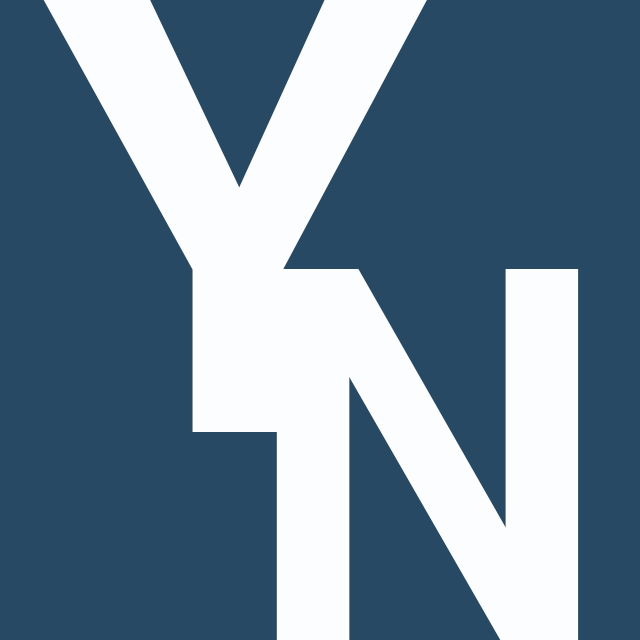
<style>
.page{position:relative;width:640px;height:640px;background:#274963}
.page>*{position:absolute;margin:0}
.t1{font:600px "Helvetica-Bold";letter-spacing:-0.1em;color:#fbfdfe}
.t2{font:515px "Helvetica-Bold";letter-spacing:-0.1em;color:#fbfdfe}
</style>
<div class="page">
<p class="t1" style="left:43px;top:0px;width:385px;height:432px">Y</p>
<p class="t2" style="left:276px;top:269px;width:303px;height:371px">N</p>
</div>
